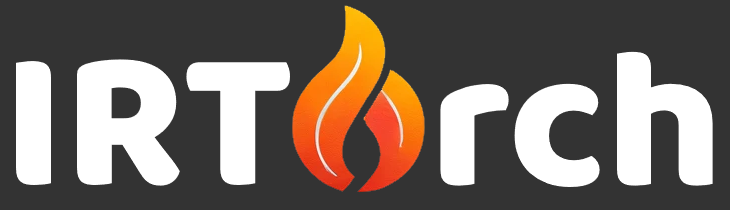
<style>
.page{position:relative;width:730px;height:210px;background:#333333}
.page>*{position:absolute;margin:0}
.t1{font:200px "Baloo";color:#ffffff}
</style>
<div class="page">
<p class="t1" style="left:440px;top:51px;width:273px;height:136px">rch</p>
<p class="t1" style="left:16px;top:59px;width:274px;height:127px">IRT</p>
</div>
